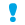
<style>
.page{position:relative;width:25px;height:25px;background:#ffffff}
.page>*{position:absolute;margin:0}
.t1{font:24px "GoudyStout";color:#00a5e4;font-weight:bold}
</style>
<div class="page">
<p class="t1" style="left:9px;top:3px;width:8px;height:19px">!</p>
</div>
